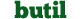
<style>
.page{position:relative;width:80px;height:19px;background:#ffffff}
.page>*{position:absolute;margin:0}
.t1{font:23.1px "ChunkFive-Roman";color:#095e21}
</style>
<div class="page">
<p class="t1" style="left:14px;top:0px;width:53px;height:19px">butil</p>
</div>
